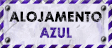
<style>
.page{position:relative;width:112px;height:48px}
.page>*{position:absolute;margin:0}
.t1{font:13.3px/16px "CenturyGothic-Bold";letter-spacing:0.005em;text-transform:uppercase;font-weight:bold}
</style>
<div class="page">
<p class="t1" style="left:9px;top:11px;width:93px;height:27px;text-align:center">alojamento<br>azul</p>
</div>
